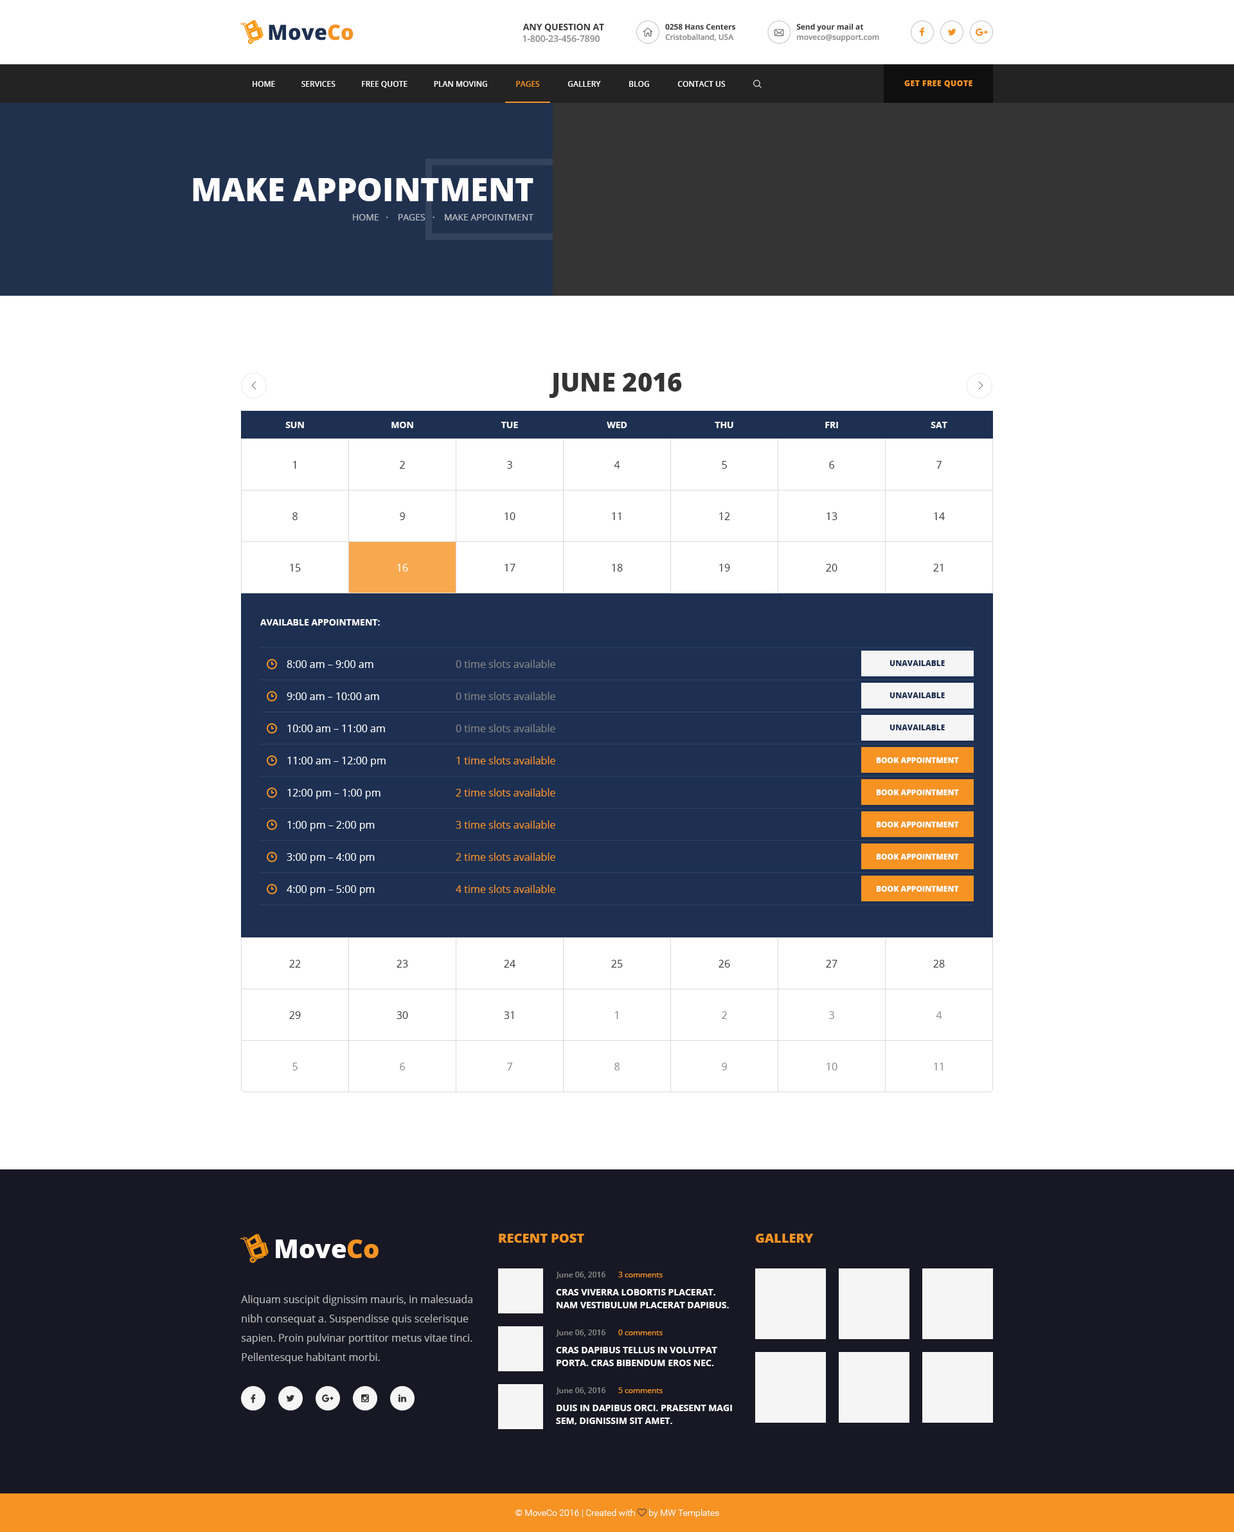
<style>
.page{position:relative;width:1234px;height:1532px;background:#ffffff}
.page>*{position:absolute;margin:0}
.t1{font:21.2px "OpenSans-Extrabold";color:#1d3052}
.t2{font:21.2px "OpenSans-Extrabold";color:#f69323}
.t3{font:9px "OpenSans-Bold";color:#343434;text-transform:uppercase}
.t4{font:7.7px "OpenSans-Bold";color:#343434}
.t5{font:9px "OpenSans-Semibold";color:#868686}
.t6{font:7.7px "OpenSans-Semibold";color:#868686}
.t7{font:7.7px "OpenSans-Extrabold";letter-spacing:0.05em;color:#f69323;text-transform:uppercase}
.t8{font:32.1px "OpenSans-Extrabold";color:#ffffff;text-transform:uppercase}
.t9{font:9px "OpenSans";color:#bcbfc5;text-transform:uppercase}
.t10{font:25.7px "OpenSans-Extrabold";color:#343434;text-transform:uppercase}
.t11{font:9px "OpenSans-Bold";color:#ffffff;text-transform:uppercase}
.t12{font:10.3px/51.4px "OpenSans";color:#343434}
.t13{font:10.3px/51.4px "OpenSans";color:#ffffff}
.t14{font:10.3px/32.1px "OpenSans";color:#ffffff}
.t15{font:10.3px/32.1px "OpenSans";color:#f69323}
.t16{font:10.3px/32.1px "OpenSans";color:#868686}
.t17{font:7.7px "OpenSans-Extrabold";color:#1d3052;text-transform:uppercase}
.t18{font:7.7px "OpenSans-Extrabold";color:#ffffff;text-transform:uppercase}
.t19{font:10.3px/51.4px "OpenSans";color:#868686}
.t20{font:25.7px "OpenSans-Extrabold";color:#fefeff}
.t21{font:25.7px "OpenSans-Extrabold";color:#f69323}
.t22{font:12.9px "OpenSans-Extrabold";color:#f69323;text-transform:uppercase}
.t23{font:7.7px "OpenSans";color:#f69323}
.t24{font:9px/12.9px "OpenSans-Bold";color:#ffffff;text-transform:uppercase}
.t25{font:10.3px/19.3px "OpenSans";color:#bbbbbc}
</style>
<div class="page">
<p class="t1" style="left:269px;top:24px;width:85px;height:16px">Move<span class="t2">Co</span></p>
<p class="t3" style="left:523px;top:23px;width:81px;height:9px">Any Question at</p>
<p class="t4" style="left:665px;top:24px;width:70px;height:6px">0258 Hans Centers</p>
<p class="t4" style="left:797px;top:23px;width:67px;height:9px">Send your mail at</p>
<p class="t5" style="left:523px;top:35px;width:77px;height:7px">1-800-23-456-7890</p>
<p class="t6" style="left:665px;top:33px;width:69px;height:8px">Cristoballand, USA</p>
<p class="t6" style="left:797px;top:34px;width:82px;height:8px">moveco@support.com</p>
<p class="t7" style="left:905px;top:80px;width:68px;height:7px">Get Free Quote</p>
<p class="t8" style="left:193px;top:178px;width:341px;height:23px">make appointment</p>
<p class="t9" style="left:353px;top:214px;width:181px;height:7px">home   ·    pages   ·    make appointment</p>
<p class="t10" style="left:549px;top:373px;width:133px;height:25px">June 2016</p>
<p class="t11" style="left:285px;top:422px;width:19px;height:6px">Sun</p>
<p class="t11" style="left:392px;top:422px;width:21px;height:6px">Mon</p>
<p class="t11" style="left:501px;top:422px;width:17px;height:6px">Tue</p>
<p class="t11" style="left:607px;top:422px;width:20px;height:6px">Wed</p>
<p class="t11" style="left:715px;top:422px;width:19px;height:6px">Thu</p>
<p class="t11" style="left:825px;top:422px;width:13px;height:6px">Fri</p>
<p class="t11" style="left:931px;top:422px;width:17px;height:6px">Sat</p>
<p class="t12" style="left:290px;top:461px;width:11px;height:111px;text-align:center">1<br>8<br>15<br>15<br>22<br>29</p>
<p class="t12" style="left:397px;top:461px;width:11px;height:111px;text-align:center">2<br>9<br><span class="t13">16<br></span>16<br>23<br>1</p>
<p class="t12" style="left:505px;top:461px;width:11px;height:111px;text-align:center">3<br>10<br>17<br>17<br>24<br>2</p>
<p class="t12" style="left:612px;top:461px;width:11px;height:111px;text-align:center">4<br>11<br>18<br>18<br>25<br>3</p>
<p class="t12" style="left:719px;top:461px;width:11px;height:111px;text-align:center">5<br>12<br>19<br>19<br>26<br>4</p>
<p class="t12" style="left:826px;top:461px;width:12px;height:111px;text-align:center">6<br>13<br>20<br>20<br>27<br>5</p>
<p class="t12" style="left:933px;top:461px;width:12px;height:111px;text-align:center">7<br>14<br>21<br>21<br>28<br>6</p>
<p class="t11" style="left:260px;top:619px;width:120px;height:7px">Available Appointment:</p>
<p class="t14" style="left:287px;top:660px;width:99px;height:236px">8:00 am – 9:00 am<br>9:00 am – 10:00 am<br>10:00 am – 11:00 am<br>11:00 am – 12:00 pm<br>12:00 pm – 1:00 pm<br>1:00 pm – 2:00 pm<br>3:00 pm – 4:00 pm<br>4:00 pm – 5:00 pm</p>
<p class="t15" style="left:456px;top:660px;width:99px;height:233px"><span class="t16">0 time slots available<br>0 time slots available<br>0 time slots available<br></span>1 time slots available<br>2 time slots available<br>3 time slots available<br>2 time slots available<br>4 time slots available</p>
<p class="t17" style="left:890px;top:660px;width:55px;height:6px">unavailable</p>
<p class="t17" style="left:890px;top:692px;width:55px;height:6px">unavailable</p>
<p class="t17" style="left:890px;top:724px;width:55px;height:6px">unavailable</p>
<p class="t18" style="left:876px;top:757px;width:83px;height:6px">Book Appointment</p>
<p class="t18" style="left:876px;top:789px;width:83px;height:6px">Book Appointment</p>
<p class="t18" style="left:876px;top:822px;width:83px;height:5px">Book Appointment</p>
<p class="t18" style="left:876px;top:854px;width:83px;height:6px">Book Appointment</p>
<p class="t18" style="left:876px;top:886px;width:83px;height:6px">Book Appointment</p>
<p class="t12" style="left:289px;top:960px;width:12px;height:110px;text-align:center">22<br>29<br><span class="t19">5</span></p>
<p class="t12" style="left:397px;top:960px;width:11px;height:110px;text-align:center">23<br>30<br><span class="t19">6</span></p>
<p class="t12" style="left:504px;top:960px;width:12px;height:110px;text-align:center">24<br>31<br><span class="t19">7</span></p>
<p class="t19" style="left:611px;top:960px;width:12px;height:110px;text-align:center"><span class="t12">25<br></span>1<br>8</p>
<p class="t19" style="left:719px;top:960px;width:11px;height:110px;text-align:center"><span class="t12">26<br></span>2<br>9</p>
<p class="t19" style="left:826px;top:960px;width:12px;height:110px;text-align:center"><span class="t12">27<br></span>3<br>10</p>
<p class="t19" style="left:933px;top:960px;width:12px;height:110px;text-align:center"><span class="t12">28<br></span>4<br>11</p>
<p class="t20" style="left:276px;top:1239px;width:103px;height:19px">Move<span class="t21">Co</span></p>
<p class="t22" style="left:499px;top:1234px;width:85px;height:9px">recent post</p>
<p class="t22" style="left:756px;top:1234px;width:58px;height:9px">Gallery</p>
<p class="t6" style="left:556px;top:1272px;width:50px;height:7px">June 06, 2016</p>
<p class="t23" style="left:618px;top:1272px;width:45px;height:5px">3 comments</p>
<p class="t24" style="left:556px;top:1289px;width:173px;height:19px">Cras viverra lobortis placerat. Nam vestibulum placerat dapibus.</p>
<p class="t25" style="left:241px;top:1295px;width:232px;height:69px">Aliquam suscipit dignissim mauris, in malesuada nibh consequat a. Suspendisse quis scelerisque sapien. Proin pulvinar porttitor metus vitae tinci. Pellentesque habitant morbi.</p>
<p class="t6" style="left:556px;top:1329px;width:50px;height:7px">June 06, 2016</p>
<p class="t23" style="left:618px;top:1329px;width:45px;height:6px">0 comments</p>
<p class="t24" style="left:556px;top:1347px;width:161px;height:19px">Cras dapibus tellus in volutpat porta. Cras bibendum eros nec.</p>
<p class="t6" style="left:556px;top:1387px;width:50px;height:7px">June 06, 2016</p>
<p class="t23" style="left:618px;top:1387px;width:45px;height:6px">5 comments</p>
<p class="t24" style="left:556px;top:1405px;width:176px;height:20px">Duis in dapibus orci. Praesent magi sem, dignissim sit amet.</p>
</div>
